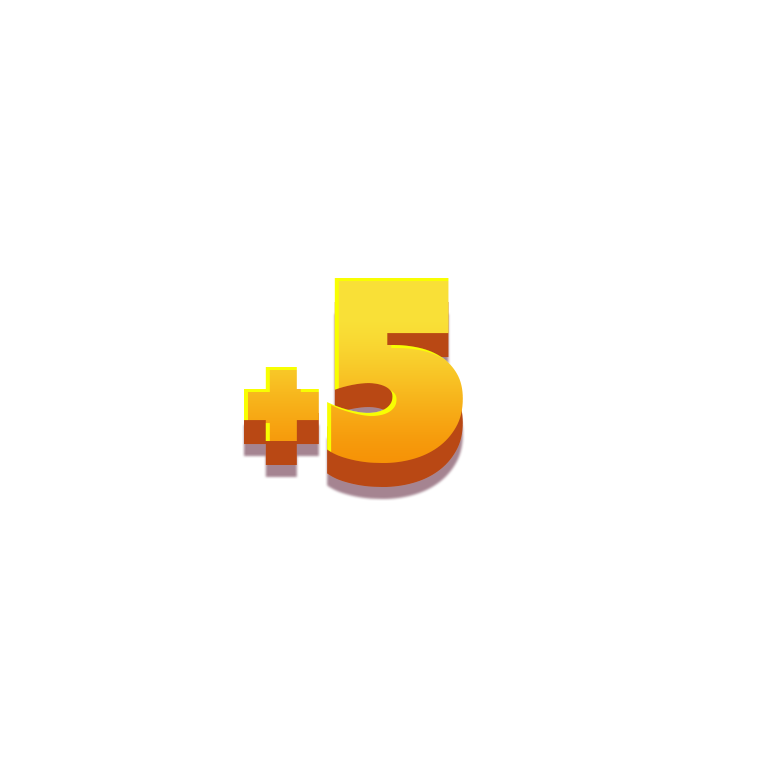
<style>
.page{position:relative;width:768px;height:768px;background:#ffffff}
.page>*{position:absolute;margin:0}
.t1{font:179.9px "Tondu-Beta"}
.t2{font:265.9px "Tondu-Beta"}
</style>
<div class="page">
<p class="t1" style="left:244px;top:278px;width:219px;height:185px">+<span class="t2">5</span></p>
<p class="t1" style="left:244px;top:302px;width:219px;height:185px">+<span class="t2">5</span></p>
</div>
